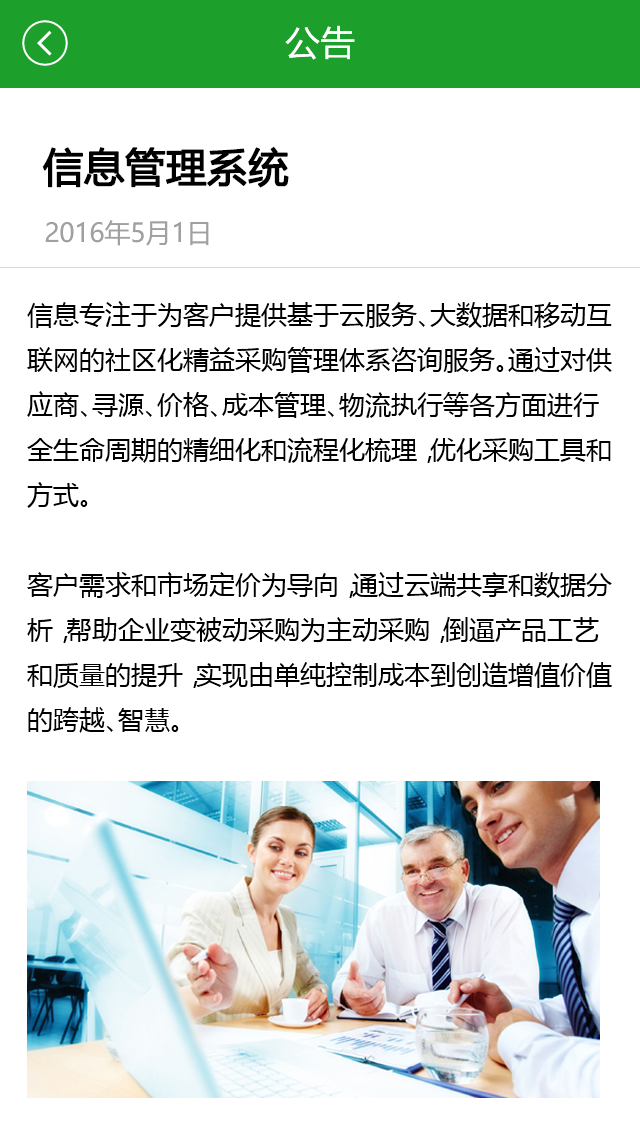
<style>
.page{position:relative;width:640px;height:1136px;background:#ffffff}
.page>*{position:absolute;margin:0}
.t1{font:35px "MicrosoftYaHei";color:#ffffff}
.t2{font:40px "MicrosoftYaHei";color:#000000;font-weight:bold}
.t3{font:26px "MicrosoftYaHei";color:#a0a0a0}
.t4{font:26px/45px "MicrosoftYaHei";color:#000000}
</style>
<div class="page">
<p class="t1" style="left:285px;top:25px;width:70px;height:35px">公告</p>
<p class="t2" style="left:42px;top:146px;width:247px;height:42px">信息管理系统</p>
<p class="t3" style="left:45px;top:220px;width:164px;height:26px">2016年5月1日</p>
<p class="t4" style="left:27px;top:301px;width:585px;height:432px">信息专注于为客户提供基于云服务、大数据和移动互联网的社区化精益采购管理体系咨询服务。通过对供应商、寻源、价格、成本管理、物流执行等各方面进行全生命周期的精细化和流程化梳理，优化采购工具和方式。<br><br>客户需求和市场定价为导向，通过云端共享和数据分析，帮助企业变被动采购为主动采购，倒逼产品工艺和质量的提升，实现由单纯控制成本到创造增值价值的跨越、智慧。</p>
</div>
